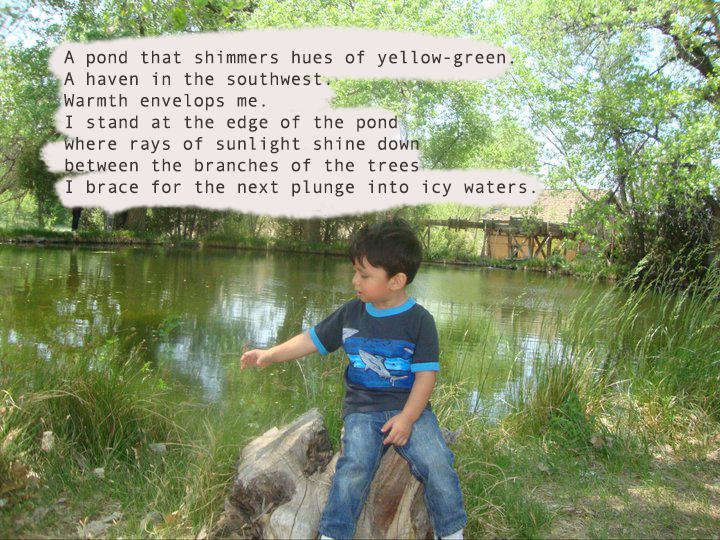
<style>
.page{position:relative;width:720px;height:540px}
.page>*{position:absolute;margin:0}
.t1{font:18px "AndaleMono";color:#3e3635}
</style>
<div class="page">
<p class="t1" style="left:64px;top:50px;width:471px;height:147px">A pond that shimmers hues of yellow-green. <br>A haven in the southwest. <br>Warmth envelops me. <br>I stand at the edge of the pond <br>where rays of sunlight shine down <br>between the branches of the trees <br>I brace for the next plunge into icy waters.</p>
</div>
